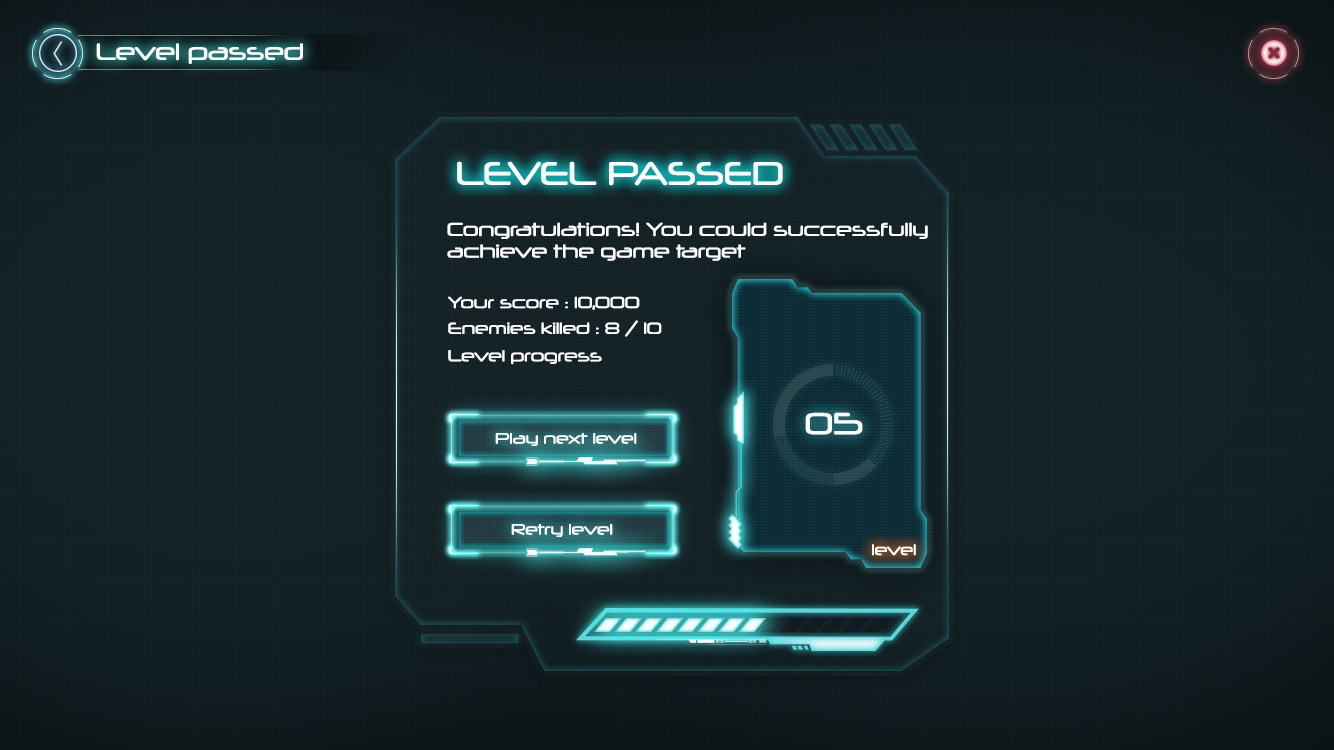
<style>
.page{position:relative;width:1334px;height:750px}
.page>*{position:absolute;margin:0}
.t1{font:22.6px "Neuropol-Regular";color:#ffffff}
.t2{font:31.7px "Neuropol-Regular";color:#ffffff}
.t3{font:18.1px "Neuropol-Regular";color:#ffffff}
.t4{font:15.6px "Neuropol-Regular";color:#ffffff}
.t5{font:29.5px "Neuropol-Regular";color:#ffffff}
.t6{font:14.5px "Neuropol-Regular";color:#ffffff}
.t7{font:14.8px "Neuropol-Regular";color:#ffffff}
</style>
<div class="page">
<p class="t1" style="left:96px;top:43px;width:207px;height:21px">Level passed</p>
<p class="t2" style="left:457px;top:161px;width:326px;height:25px">LEVEL PASSED</p>
<p class="t3" style="left:447px;top:222px;width:481px;height:39px">Congratulations! You could successfully<br>achieve the game target</p>
<p class="t4" style="left:447px;top:296px;width:193px;height:14px">Your score : 10,000</p>
<p class="t4" style="left:448px;top:320px;width:214px;height:17px">Enemies killed : 8 / 10</p>
<p class="t4" style="left:448px;top:350px;width:154px;height:15px">Level progress</p>
<p class="t5" style="left:805px;top:412px;width:58px;height:23px">05</p>
<p class="t6" style="left:495px;top:433px;width:142px;height:13px">Play next level</p>
<p class="t6" style="left:511px;top:524px;width:102px;height:13px">Retry level</p>
<p class="t7" style="left:872px;top:544px;width:44px;height:12px">level</p>
</div>
